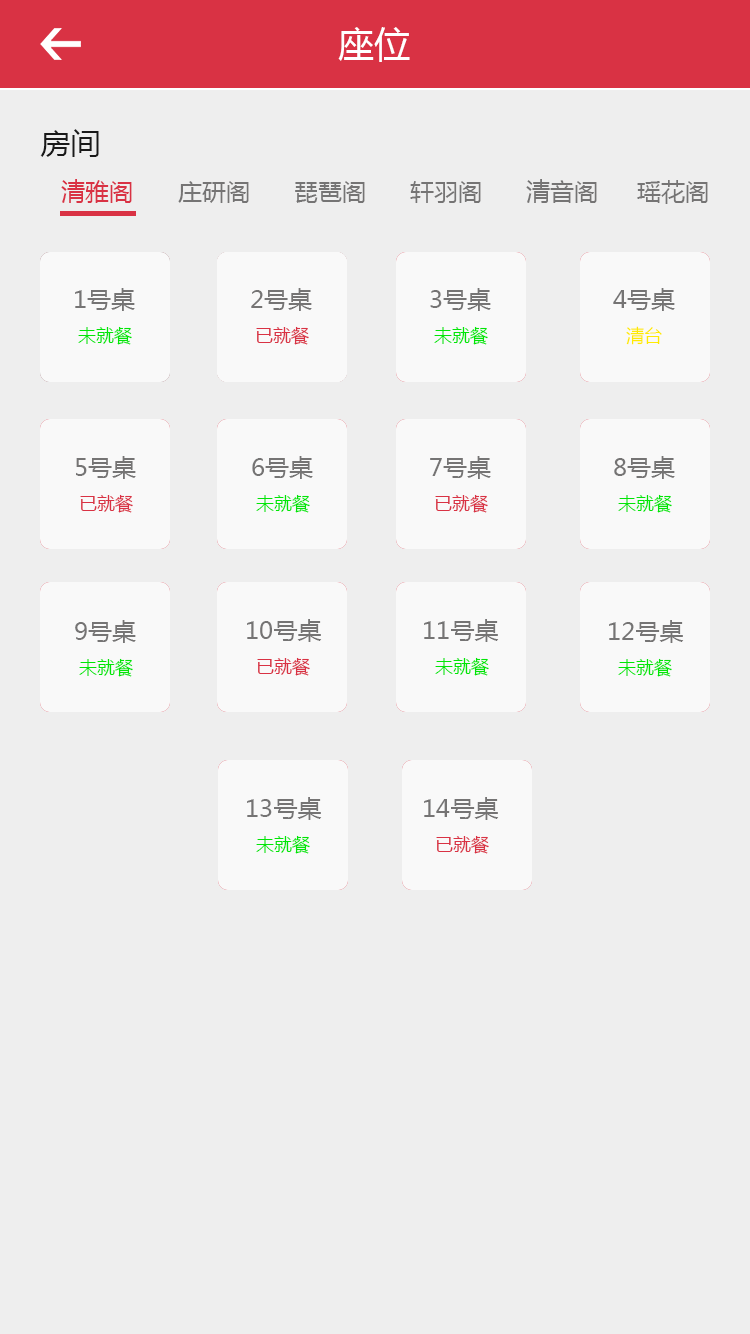
<style>
.page{position:relative;width:750px;height:1334px;background:#eeeeee}
.page>*{position:absolute;margin:0}
.t1{font:36px "MicrosoftYaHei";color:#ffffff}
.t2{font:30px "MicrosoftYaHei";color:#191919}
.t3{font:24px "MicrosoftYaHei";color:#d93244}
.t4{font:24px "MicrosoftYaHei";color:#757474}
.t5{font:18px "MicrosoftYaHei";color:#00e605}
.t6{font:18px "MicrosoftYaHei";color:#d93244}
.t7{font:18px "MicrosoftYaHei";color:#ffea01}
</style>
<div class="page">
<p class="t1" style="left:338px;top:27px;width:72px;height:35px">座位</p>
<p class="t2" style="left:40px;top:129px;width:59px;height:28px">房间</p>
<p class="t3" style="left:61px;top:179px;width:71px;height:24px">清雅阁</p>
<p class="t4" style="left:178px;top:181px;width:71px;height:22px">庄研阁</p>
<p class="t4" style="left:295px;top:181px;width:70px;height:22px">琵琶阁</p>
<p class="t4" style="left:410px;top:181px;width:71px;height:22px">轩羽阁</p>
<p class="t4" style="left:526px;top:179px;width:71px;height:24px">清音阁</p>
<p class="t4" style="left:637px;top:180px;width:71px;height:24px">瑶花阁</p>
<p class="t4" style="left:75px;top:288px;width:60px;height:23px">1号桌</p>
<p class="t4" style="left:251px;top:288px;width:61px;height:23px">2号桌</p>
<p class="t4" style="left:430px;top:288px;width:61px;height:23px">3号桌</p>
<p class="t4" style="left:613px;top:288px;width:62px;height:23px">4号桌</p>
<p class="t5" style="left:78px;top:326px;width:54px;height:19px">未就餐</p>
<p class="t6" style="left:256px;top:326px;width:53px;height:19px">已就餐</p>
<p class="t5" style="left:434px;top:326px;width:54px;height:19px">未就餐</p>
<p class="t7" style="left:626px;top:326px;width:36px;height:19px">清台</p>
<p class="t4" style="left:76px;top:456px;width:60px;height:23px">5号桌</p>
<p class="t4" style="left:252px;top:456px;width:61px;height:23px">6号桌</p>
<p class="t4" style="left:430px;top:456px;width:61px;height:23px">7号桌</p>
<p class="t4" style="left:614px;top:456px;width:61px;height:23px">8号桌</p>
<p class="t6" style="left:80px;top:494px;width:53px;height:19px">已就餐</p>
<p class="t5" style="left:256px;top:494px;width:54px;height:19px">未就餐</p>
<p class="t6" style="left:435px;top:494px;width:53px;height:19px">已就餐</p>
<p class="t5" style="left:618px;top:494px;width:54px;height:19px">未就餐</p>
<p class="t4" style="left:75px;top:620px;width:61px;height:23px">9号桌</p>
<p class="t4" style="left:247px;top:619px;width:75px;height:23px">10号桌</p>
<p class="t4" style="left:424px;top:619px;width:75px;height:23px">11号桌</p>
<p class="t4" style="left:609px;top:620px;width:75px;height:23px">12号桌</p>
<p class="t5" style="left:79px;top:658px;width:54px;height:19px">未就餐</p>
<p class="t6" style="left:257px;top:657px;width:53px;height:19px">已就餐</p>
<p class="t5" style="left:435px;top:657px;width:54px;height:19px">未就餐</p>
<p class="t5" style="left:618px;top:658px;width:54px;height:19px">未就餐</p>
<p class="t4" style="left:247px;top:797px;width:75px;height:23px">13号桌</p>
<p class="t4" style="left:424px;top:797px;width:75px;height:23px">14号桌</p>
<p class="t5" style="left:256px;top:835px;width:54px;height:19px">未就餐</p>
<p class="t6" style="left:436px;top:835px;width:53px;height:19px">已就餐</p>
</div>
